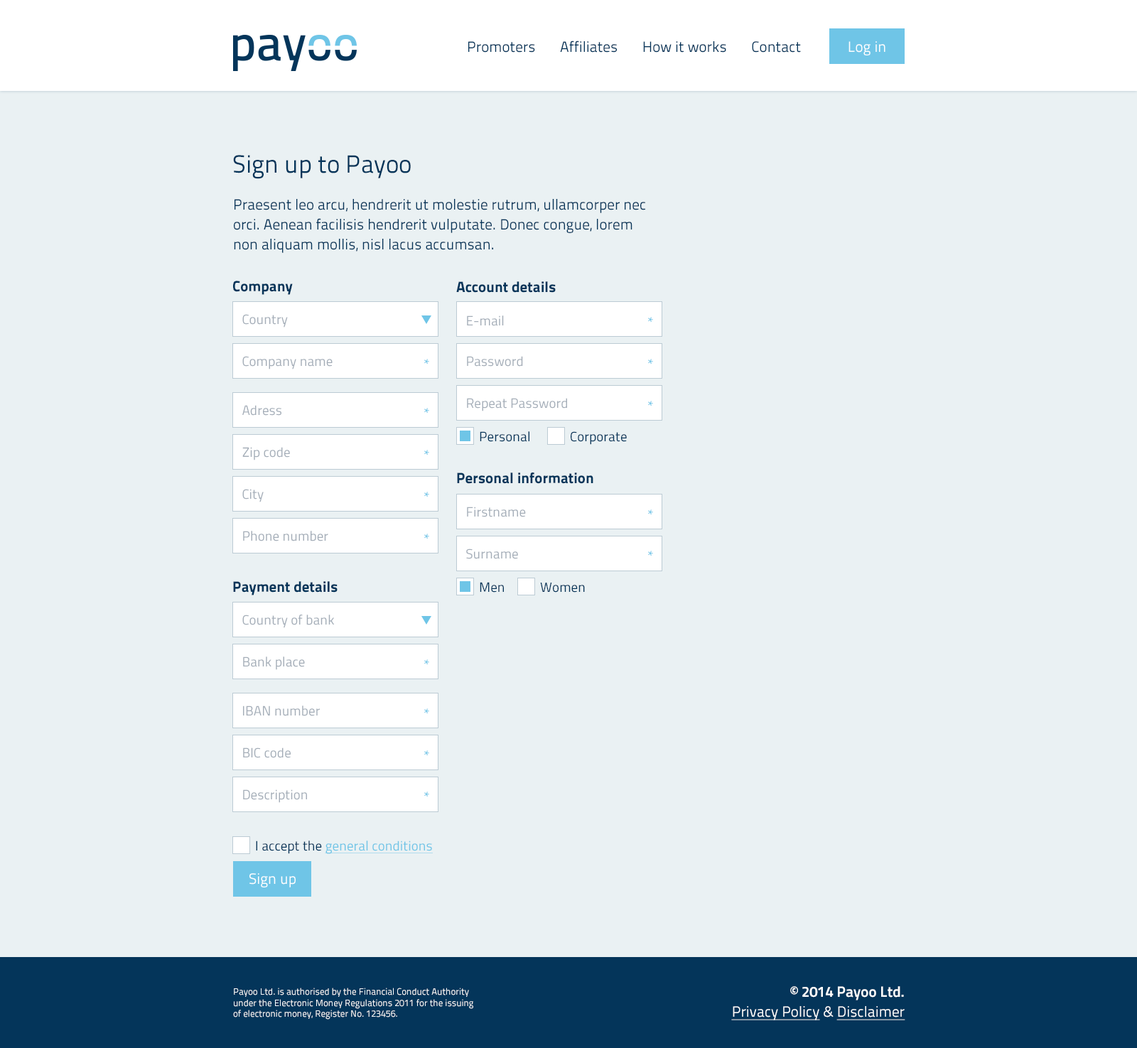
<style>
.page{position:relative;width:1137px;height:1048px;background:#eaf1f3}
.page>*{position:absolute;margin:0}
.t1{font:14.9px "TitilliumText25L-400wt";color:#04355a}
.t2{font:14.9px "TitilliumText25L-400wt";color:#ffffff}
.t3{font:24.9px "TitilliumText25L-400wt";color:#04355a}
.t4{font:14.9px/19.9px "TitilliumText25L-400wt";color:#04355a}
.t5{font:14.9px "TitilliumText25L-999wt";color:#04355a}
.t6{font:13.5px "TitilliumText25L-400wt";color:#a4adb8}
.t7{font:14.9px "TitilliumText25L-400wt";color:#a4adb8}
.t8{font:14.9px "TitilliumText25L-400wt";color:#6fc5e7}
.t9{font:13.5px "TitilliumText25L-400wt";color:#04355a}
.t10{font:13.5px "TitilliumText25L-400wt";color:#6fc5e7;text-decoration:underline}
.t11{font:9.2px "TitilliumText25L-400wt";color:#ffffff}
.t12{font:14.9px/19.9px "TitilliumText25L-800wt";color:#ffffff}
.t13{font:14.9px/19.9px "TitilliumText25L-400wt";color:#ffffff;text-decoration:underline}
.t14{font:14.9px/19.9px "TitilliumText25L-400wt";color:#ffffff}
</style>
<div class="page">
<p class="t1" style="left:468px;top:41px;width:333px;height:12px">Promoters       Affiliates       How it works       Contact</p>
<p class="t2" style="left:849px;top:41px;width:37px;height:14px">Log in</p>
<p class="t3" style="left:233px;top:155px;width:178px;height:24px">Sign up to Payoo</p>
<p class="t4" style="left:234px;top:199px;width:411px;height:54px">Praesent leo arcu, hendrerit ut molestie rutrum, ullamcorper nec orci. Aenean facilisis hendrerit vulputate. Donec congue, lorem non aliquam mollis, nisl lacus accumsan.</p>
<p class="t5" style="left:233px;top:281px;width:60px;height:14px">Company</p>
<p class="t5" style="left:456px;top:281px;width:100px;height:12px">Account details</p>
<p class="t6" style="left:242px;top:314px;width:46px;height:14px">Country</p>
<p class="t6" style="left:467px;top:316px;width:37px;height:10px"><span class="t7"><br></span>   E-mail</p>
<p class="t8" style="left:648px;top:317px;width:5px;height:6px">*</p>
<p class="t6" style="left:242px;top:356px;width:91px;height:14px">Company name</p>
<p class="t8" style="left:424px;top:359px;width:5px;height:6px">*</p>
<p class="t6" style="left:467px;top:356px;width:56px;height:11px">Password</p>
<p class="t8" style="left:648px;top:359px;width:5px;height:6px">*</p>
<p class="t6" style="left:467px;top:398px;width:100px;height:14px">Repeat Password</p>
<p class="t8" style="left:648px;top:401px;width:5px;height:6px">*</p>
<p class="t6" style="left:242px;top:405px;width:39px;height:11px">Adress</p>
<p class="t8" style="left:424px;top:408px;width:5px;height:6px">*</p>
<p class="t9" style="left:480px;top:431px;width:50px;height:11px">Personal</p>
<p class="t9" style="left:571px;top:431px;width:56px;height:14px">Corporate</p>
<p class="t6" style="left:242px;top:447px;width:48px;height:14px">Zip code</p>
<p class="t8" style="left:424px;top:450px;width:5px;height:6px">*</p>
<p class="t5" style="left:457px;top:473px;width:137px;height:11px">Personal information</p>
<p class="t6" style="left:242px;top:489px;width:22px;height:14px">City</p>
<p class="t8" style="left:424px;top:492px;width:5px;height:6px">*</p>
<p class="t6" style="left:467px;top:507px;width:59px;height:10px">Firstname</p>
<p class="t8" style="left:648px;top:510px;width:5px;height:5px">*</p>
<p class="t6" style="left:243px;top:531px;width:85px;height:11px">Phone number</p>
<p class="t8" style="left:424px;top:534px;width:5px;height:6px">*</p>
<p class="t6" style="left:466px;top:549px;width:52px;height:10px">Surname</p>
<p class="t8" style="left:648px;top:551px;width:5px;height:6px">*</p>
<p class="t5" style="left:233px;top:581px;width:105px;height:15px">Payment details</p>
<p class="t9" style="left:480px;top:582px;width:24px;height:11px">Men</p>
<p class="t9" style="left:540px;top:583px;width:45px;height:10px">Women</p>
<p class="t6" style="left:242px;top:615px;width:93px;height:13px">Country of bank</p>
<p class="t6" style="left:243px;top:657px;width:62px;height:13px">Bank place</p>
<p class="t8" style="left:424px;top:660px;width:5px;height:5px">*</p>
<p class="t6" style="left:243px;top:706px;width:77px;height:11px">IBAN number</p>
<p class="t8" style="left:424px;top:709px;width:5px;height:5px">*</p>
<p class="t6" style="left:243px;top:748px;width:48px;height:10px">BIC code</p>
<p class="t8" style="left:424px;top:751px;width:5px;height:5px">*</p>
<p class="t6" style="left:243px;top:790px;width:64px;height:13px">Description</p>
<p class="t8" style="left:424px;top:792px;width:5px;height:6px">*</p>
<p class="t10" style="left:256px;top:841px;width:177px;height:13px"><span class="t9">I accept the </span>general conditions</p>
<p class="t2" style="left:249px;top:874px;width:47px;height:14px">Sign up</p>
<p class="t11" style="left:233px;top:988px;width:240px;height:32px">Payoo Ltd. is authorised by the Financial Conduct Authority under the Electronic Money Regulations 2011 for the issuing of electronic money, Register No. 123456.</p>
<p class="t12" style="left:731px;top:987px;width:175px;height:34px;text-align:right">© 2014 Payoo Ltd.<br><span class="t13">Privacy Policy</span><span class="t14"> &amp; </span><span class="t13">Disclaimer</span></p>
</div>
